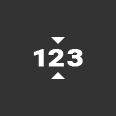
<style>
.page{position:relative;width:116px;height:116px;background:#333333}
.page>*{position:absolute;margin:0}
.t1{font:23px "Roboto-Bold";letter-spacing:-0.05em;color:#ffffff;font-weight:bold;scale:1.28 1}
.t2{font:23px "Roboto-Bold";letter-spacing:0.01em;color:#ffffff;font-weight:bold;scale:1.28 1}
</style>
<div class="page">
<p class="t1" style="left:33px;top:49px;width:31px;height:18px">1<span class="t2">2</span></p>
<p class="t2" style="left:67px;top:49px;width:16px;height:18px"><span class="t1">     </span>3</p>
</div>
